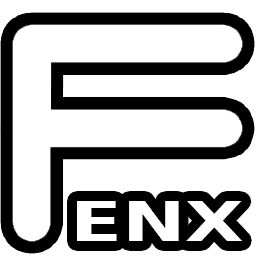
<style>
.page{position:relative;width:256px;height:256px;background:#ffffff}
.page>*{position:absolute;margin:0}
.t1{font:54.7px "DejaVuSans-Bold";color:#ffffff;scale:1.39 1}
</style>
<div class="page">
<p class="t1" style="left:77px;top:201px;width:165px;height:40px">ENX</p>
</div>
